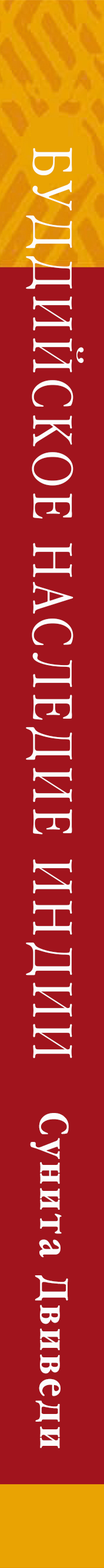
<style>
.page{position:relative;width:104px;height:1568px;background:#a1141d}
.page>*{position:absolute;margin:0}
.t1{font:61.6px "GaramondNarrowPlain";letter-spacing:0.08em;color:#fcfcfc}
.t2{font:44.3px "GaramondNarrowBold";letter-spacing:0.08em;color:#fcfcfc}
</style>
<div class="page">
<p class="t1" style="left:26px;top:148px;width:58px;height:910px;rotate:90deg">БУДДИЙСКОЕ НАСЛЕДИЕ ИНДИИ</p>
<p class="t2" style="left:30px;top:1113px;width:39px;height:335px;rotate:90deg">Сунита Двиведи</p>
</div>
